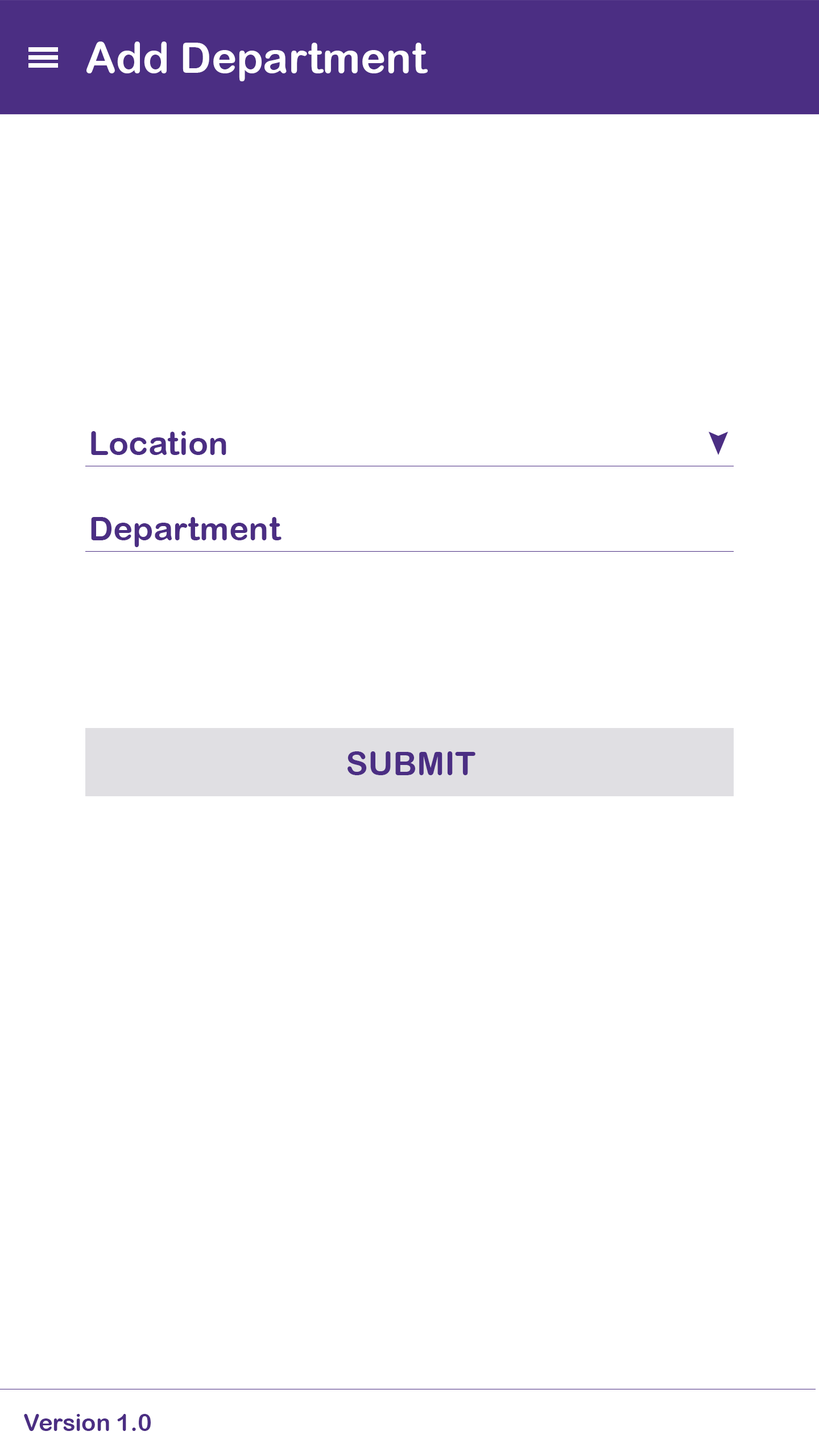
<style>
.page{position:relative;width:819px;height:1456px;background:#ffffff}
.page>*{position:absolute;margin:0}
.t1{font:42.7px "ArialRoundedMTBold";color:#ffffff}
.t2{font:33.2px "ArialRoundedMTBold";color:#4b2e83}
.t3{font:23.7px "ArialRoundedMTBold";color:#4b2e83}
</style>
<div class="page">
<p class="t1" style="left:86px;top:42px;width:342px;height:39px">Add Department</p>
<p class="t2" style="left:91px;top:431px;width:135px;height:24px">Location</p>
<p class="t2" style="left:91px;top:517px;width:191px;height:30px">Department</p>
<p class="t2" style="left:348px;top:751px;width:127px;height:24px">SUBMIT</p>
<p class="t3" style="left:24px;top:1414px;width:127px;height:17px">Version 1.0</p>
</div>
